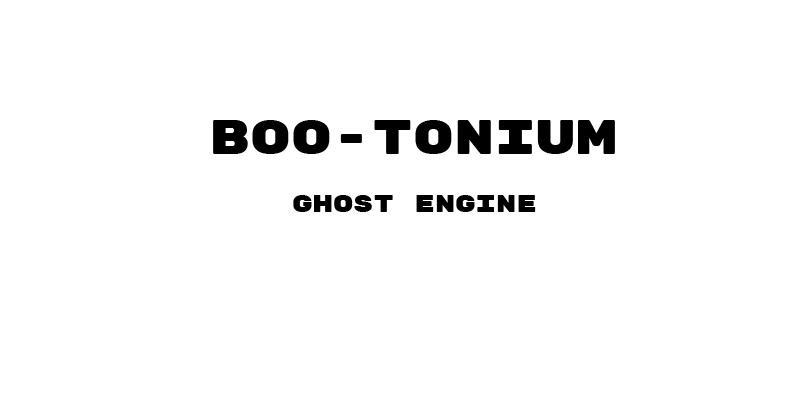
<style>
.page{position:relative;width:800px;height:400px;background:#ffffff}
.page>*{position:absolute;margin:0}
.t1{font:48px "RubikMonoOne-Regular";color:#000000}
.t2{font:24px "RubikMonoOne-Regular";color:#000000}
</style>
<div class="page">
<p class="t1" style="left:213px;top:120px;width:402px;height:34px">Boo-tonium</p>
<p class="t2" style="left:293px;top:195px;width:243px;height:17px">Ghost Engine</p>
</div>
